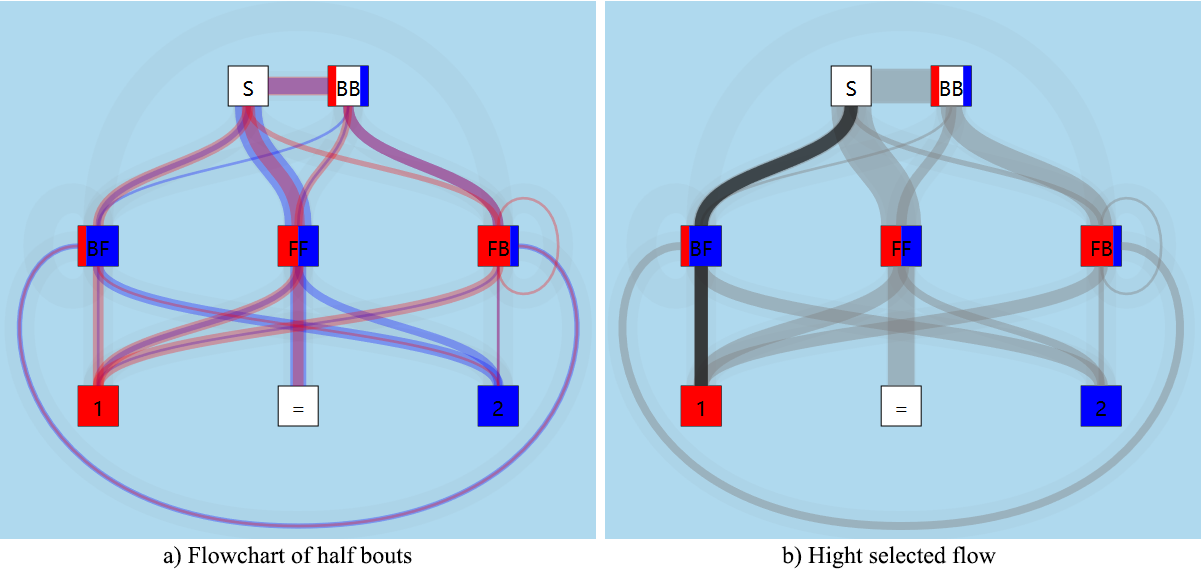
<style>
.page{position:relative;width:1201px;height:572px;background:#afd9ee}
.page>*{position:absolute;margin:0}
.t1{font:24px "TimesNewRomanPSMT";color:#000000}
</style>
<div class="page">
<p class="t1" style="left:163px;top:546px;width:249px;height:23px">a) Flowchart of half bouts</p>
<p class="t1" style="left:781px;top:546px;width:215px;height:23px">b) Hight selected flow</p>
</div>
